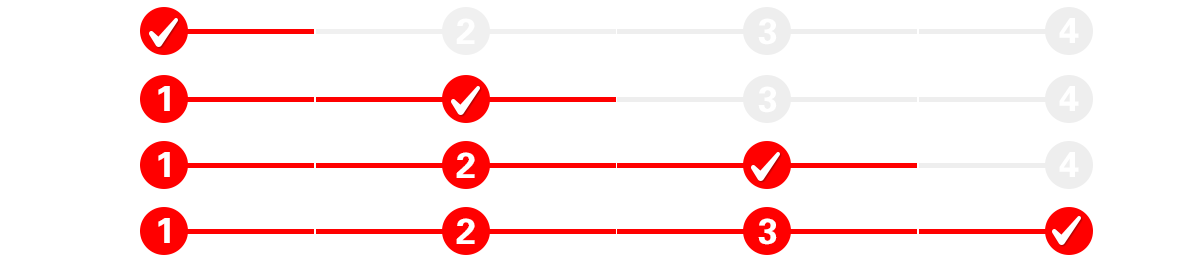
<style>
.page{position:relative;width:1200px;height:272px;background:#ffffff}
.page>*{position:absolute;margin:0}
.t1{font:36px "FZDHTJW--GB1-0";letter-spacing:0.05em;color:#ffffff}
</style>
<div class="page">
<p class="t1" style="left:456px;top:18px;width:19px;height:26px">2</p>
<p class="t1" style="left:758px;top:18px;width:19px;height:27px">3</p>
<p class="t1" style="left:1059px;top:18px;width:20px;height:25px">4</p>
<p class="t1" style="left:158px;top:86px;width:12px;height:25px">1</p>
<p class="t1" style="left:758px;top:86px;width:19px;height:27px">3</p>
<p class="t1" style="left:1059px;top:86px;width:20px;height:25px">4</p>
<p class="t1" style="left:158px;top:152px;width:12px;height:25px">1</p>
<p class="t1" style="left:456px;top:152px;width:19px;height:26px">2</p>
<p class="t1" style="left:1059px;top:152px;width:20px;height:25px">4</p>
<p class="t1" style="left:158px;top:218px;width:12px;height:25px">1</p>
<p class="t1" style="left:456px;top:218px;width:19px;height:26px">2</p>
<p class="t1" style="left:758px;top:218px;width:19px;height:27px">3</p>
</div>
